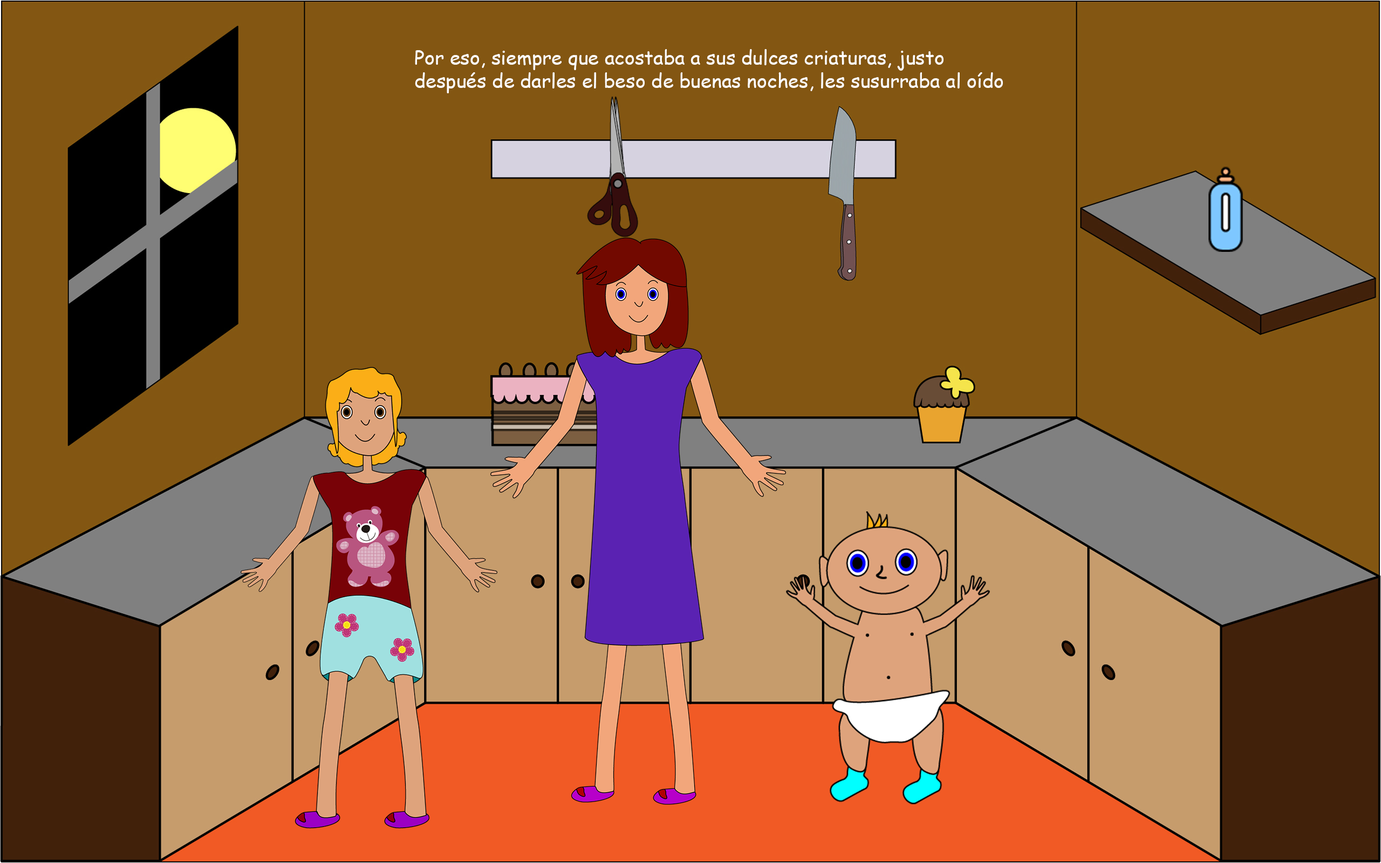
<style>
.page{position:relative;width:1381px;height:863px;background:#835612}
.page>*{position:absolute;margin:0}
.t1{font:19.4px "ComicSansMS";color:#ffffff}
</style>
<div class="page">
<p class="t1" style="left:415px;top:49px;width:588px;height:44px">Por eso, siempre que acostaba a sus dulces criaturas, justo<br>después de darles el beso de buenas noches, les susurraba al oído</p>
</div>
